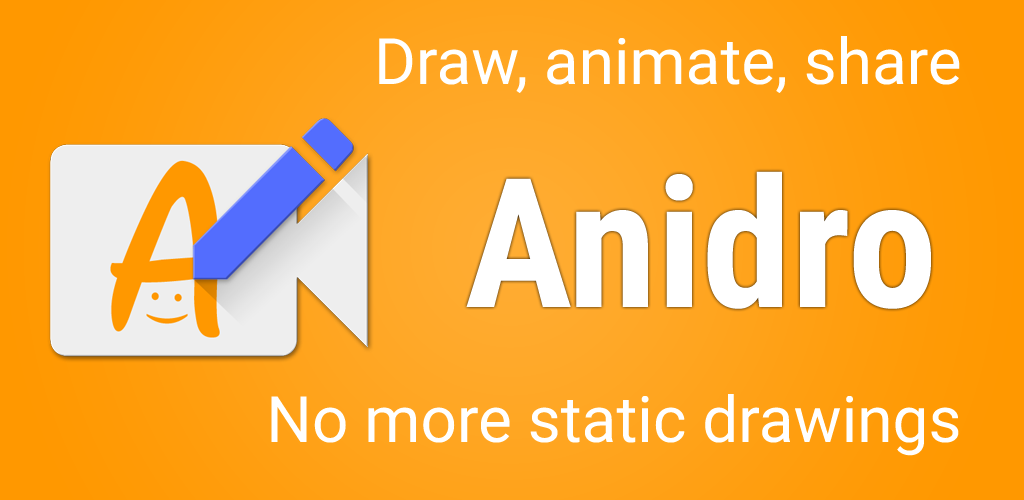
<style>
.page{position:relative;width:1024px;height:500px}
.page>*{position:absolute;margin:0}
.t1{font:64px "Roboto-Regular";color:#ffffff}
.t2{font:180px "RobotoCondensed-Bold";color:#ffffff}
</style>
<div class="page">
<p class="t1" style="left:379px;top:36px;width:581px;height:57px">Draw, animate, share</p>
<p class="t2" style="left:466px;top:171px;width:465px;height:138px">Anidro</p>
<p class="t1" style="left:271px;top:394px;width:688px;height:62px">No more static drawings</p>
</div>
